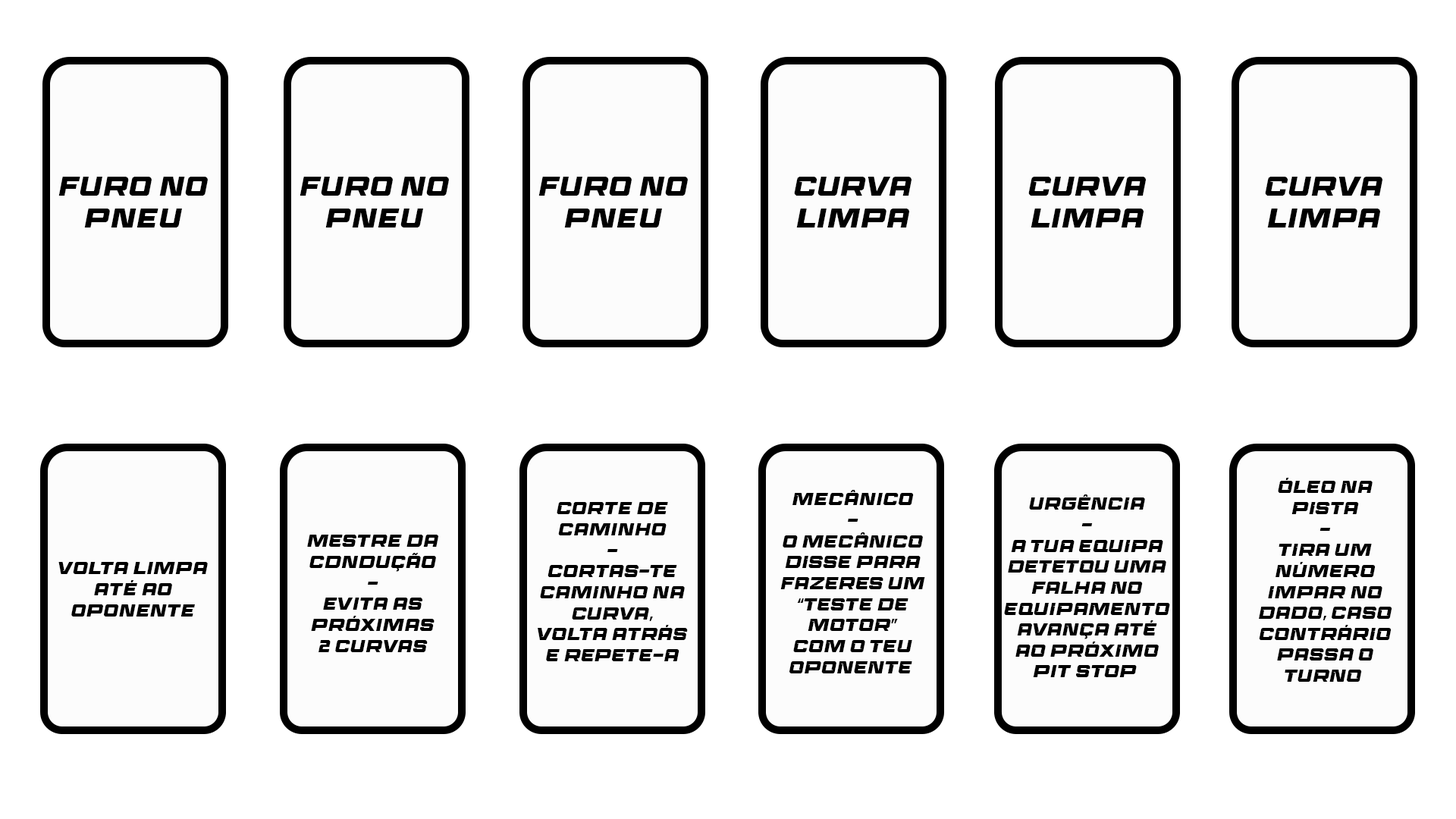
<style>
.page{position:relative;width:1456px;height:819px;background:#ffffff}
.page>*{position:absolute;margin:0}
.t1{font:26.7px "RaceSportRegular";color:#000000}
.t2{font:17.5px "RaceSportRegular";color:#000000}
</style>
<div class="page">
<p class="t1" style="left:58px;top:177px;width:150px;height:50px;text-align:center">furo no<br>pneu</p>
<p class="t1" style="left:300px;top:177px;width:149px;height:50px;text-align:center">furo no<br>pneu</p>
<p class="t1" style="left:538px;top:177px;width:150px;height:50px;text-align:center">furo no<br>pneu</p>
<p class="t1" style="left:794px;top:177px;width:118px;height:50px;text-align:center">Curva<br>limpa</p>
<p class="t1" style="left:1028px;top:177px;width:118px;height:50px;text-align:center">Curva<br>limpa</p>
<p class="t1" style="left:1265px;top:177px;width:117px;height:50px;text-align:center">Curva<br>limpa</p>
<p class="t2" style="left:1259px;top:478px;width:133px;height:204px;text-align:center">ÓLEO NA<br>PISTA<br>-<br>tIRA UM<br>NÚMERO<br>IMPAR NO<br>DADO, CASO<br>CONTRÁRIO<br>PASSA O<br>TURNO</p>
<p class="t2" style="left:780px;top:490px;width:145px;height:183px;text-align:center">Mecânico<br>-<br>o MECÂNICO<br>DISSE PARA<br>FAZERES UM<br>“TESTE DE<br>MOTOR”<br>COM O TEU<br>OPONENTE</p>
<p class="t2" style="left:1004px;top:494px;width:166px;height:183px;text-align:center">urGÊNCIA<br>-<br>a TUA EQUIPA<br>DETETOU UMA<br>FALHA NO<br>EQUIPAMENTO<br>AVANÇA ATÉ<br>AO PRÓXIMO<br>pit sTOP</p>
<p class="t2" style="left:538px;top:502px;width:150px;height:159px;text-align:center">Corte de<br>caminho<br>-<br>coRTAS-TE<br>CAMINHO NA<br>CURVA,<br>VOLTA ATRÁS<br>E REPETE-A</p>
<p class="t2" style="left:307px;top:535px;width:131px;height:117px;text-align:center">mEstre da<br>cdndução<br>-<br>evita as<br>próximas<br>2 curvas</p>
<p class="t2" style="left:58px;top:562px;width:150px;height:55px;text-align:center">Volta limpa<br>até ao<br>oponente</p>
</div>
